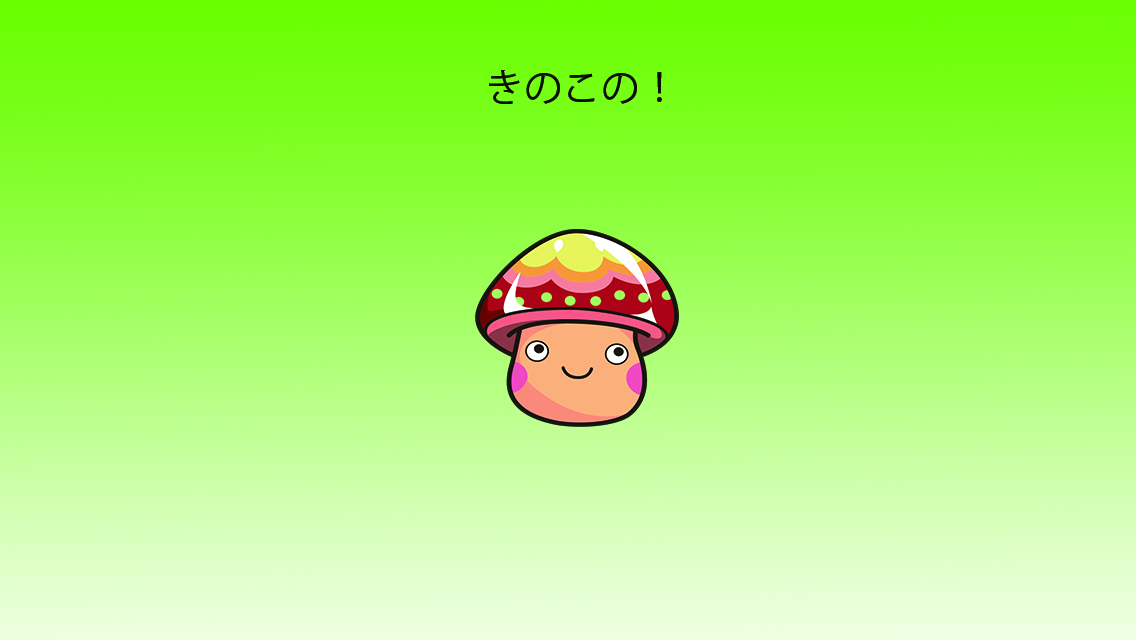
<style>
.page{position:relative;width:1136px;height:640px}
.page>*{position:absolute;margin:0}
.t1{font:38.9px "KozGoPr6N-Regular";color:#080d06}
</style>
<div class="page">
<p class="t1" style="left:489px;top:70px;width:173px;height:34px">きのこの！</p>
</div>
